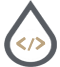
<style>
.page{position:relative;width:60px;height:67px;background:#ffffff}
.page>*{position:absolute;margin:0}
.t1{font:25px "ChaparralPro-Bold";letter-spacing:-0.075em;color:#bca480;font-weight:bold;scale:1.04 1}
.t2{font:16.2px "ChaparralPro-Bold";letter-spacing:-0.075em;color:#bca480;font-weight:bold;scale:1.04 1}
</style>
<div class="page">
<p class="t1" style="left:16px;top:36px;width:30px;height:15px;rotate:-1deg">&lt;<span class="t2">/</span>&gt;</p>
</div>
